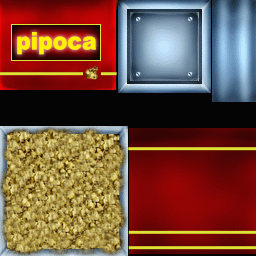
<style>
.page{position:relative;width:256px;height:256px}
.page>*{position:absolute;margin:0}
.t1{font:24px "Arial-Black";color:#fff000;scale:0.92 1}
</style>
<div class="page">
<p class="t1" style="left:17px;top:32px;width:79px;height:23px">pipoca</p>
</div>
